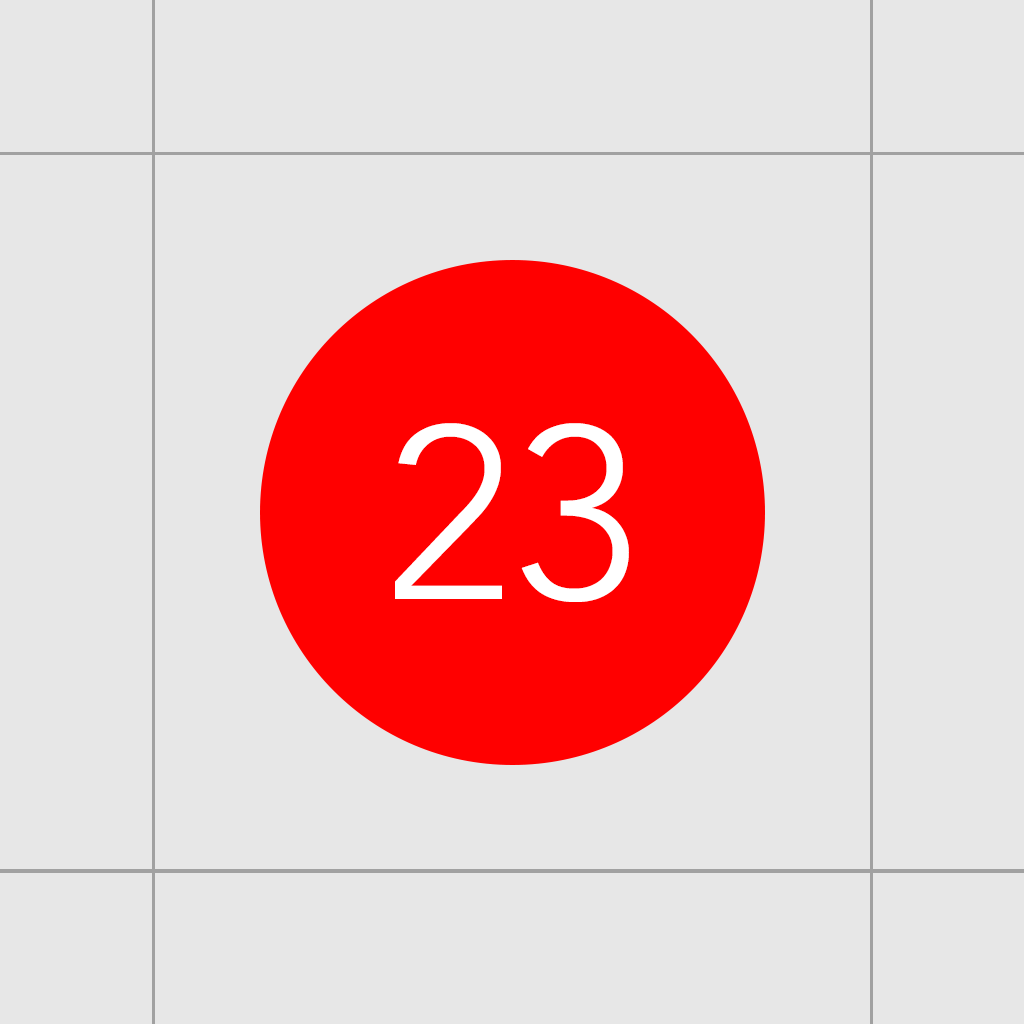
<style>
.page{position:relative;width:1024px;height:1024px;background:#e7e7e7}
.page>*{position:absolute;margin:0}
.t1{font:244px "Avenir-Light";color:#ffffff}
</style>
<div class="page">
<p class="t1" style="left:395px;top:423px;width:234px;height:179px">23</p>
</div>
